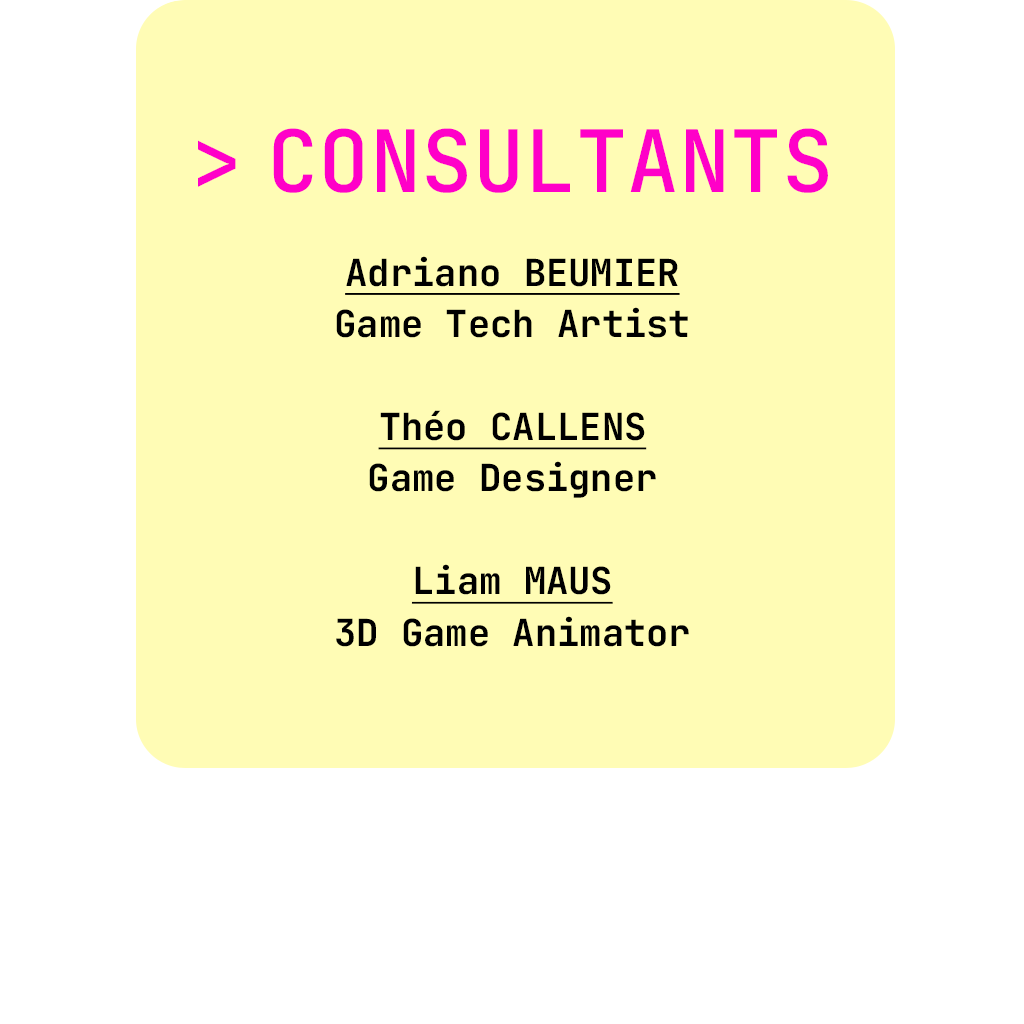
<style>
.page{position:relative;width:1024px;height:1024px;background:#fffcb5}
.page>*{position:absolute;margin:0}
.t1{font:85.8px "JetBrainsMonoRoman-Medium";color:#ff00c8}
.t2{font:37.2px/51.5px "JetBrainsMonoRoman-Bold";color:#000000}
.t3{font:37.2px/51.5px "JetBrainsMonoRoman-Bold";color:#000000;text-decoration:underline}
</style>
<div class="page">
<p class="t1" style="left:198px;top:128px;width:630px;height:65px">CONSULTANTS</p>
<p class="t2" style="left:336px;top:256px;width:353px;height:391px;text-align:center"><span class="t3">Adriano BEUMIER<br></span>Game Tech Artist<br><br><span class="t3">Théo CALLENS<br></span>Game Designer<br><br><span class="t3">Liam MAUS<br></span>3D Game Animator</p>
</div>
